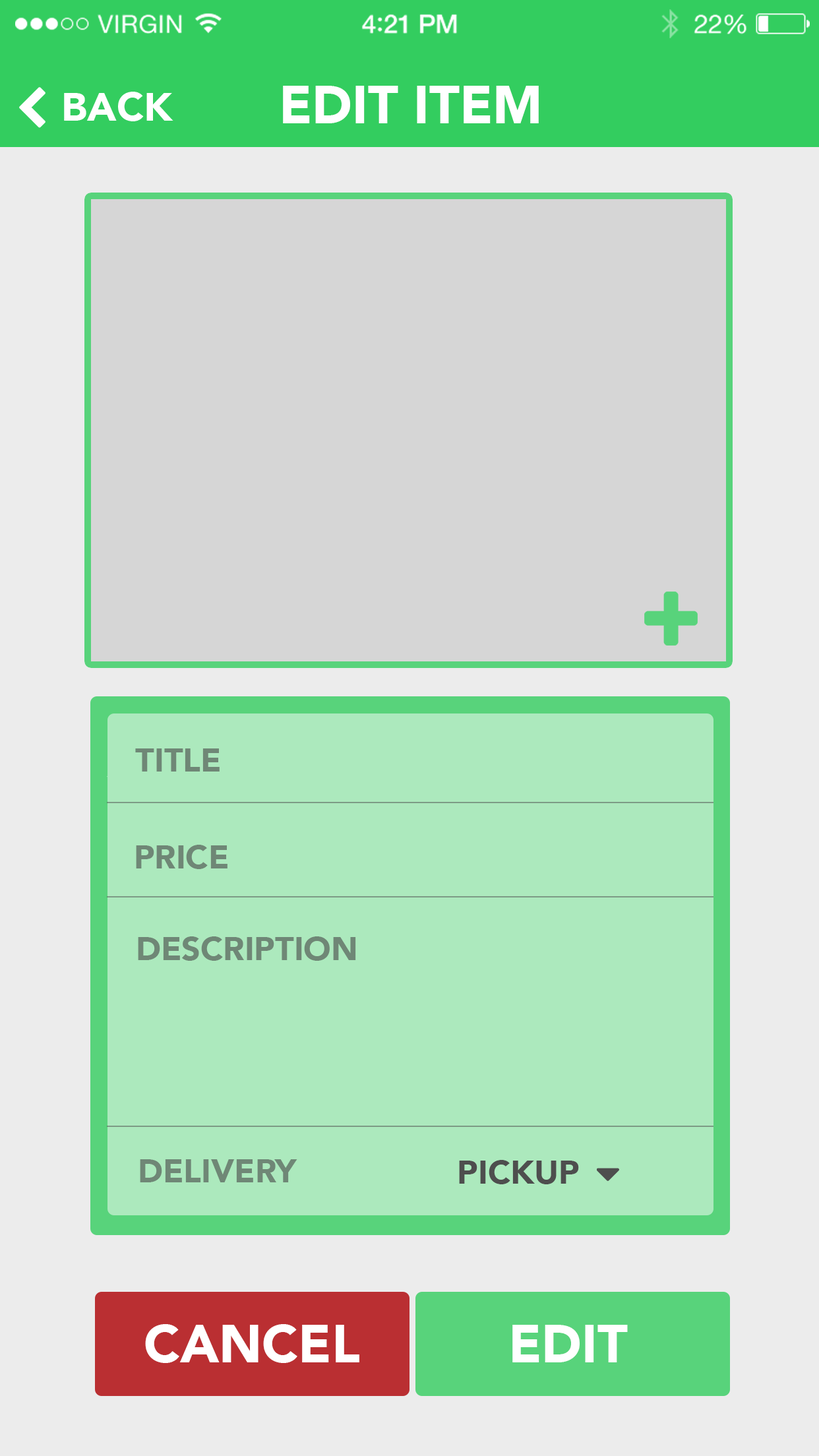
<style>
.page{position:relative;width:819px;height:1456px;background:#ececec}
.page>*{position:absolute;margin:0}
.t1{font:52.8px "Avenir-Black";color:#ffffff}
.t2{font:33px "Avenir-Black";color:#6f8776}
.t3{font:33px "Avenir-Black";color:#4e4e4e}
</style>
<div class="page">
<p class="t1" style="left:283px;top:86px;width:256px;height:37px">EDIT ITEM</p>
<p class="t2" style="left:135px;top:748px;width:85px;height:24px">TITLE</p>
<p class="t2" style="left:136px;top:845px;width:91px;height:24px">PRICE</p>
<p class="t2" style="left:138px;top:936px;width:218px;height:25px">DESCRIPTION</p>
<p class="t2" style="left:140px;top:1159px;width:157px;height:23px">DELIVERY</p>
<p class="t3" style="left:459px;top:1160px;width:120px;height:24px">PICKUP</p>
<p class="t1" style="left:145px;top:1324px;width:214px;height:39px">CANCEL</p>
<p class="t1" style="left:512px;top:1325px;width:116px;height:37px">EDIT</p>
</div>
